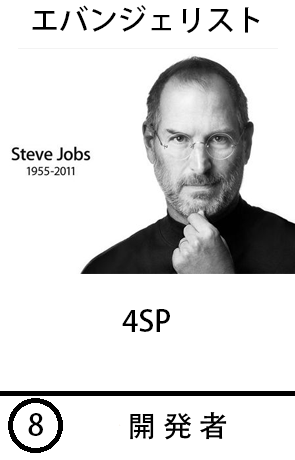
<style>
.page{position:relative;width:295px;height:460px;background:#ffffff}
.page>*{position:absolute;margin:0}
.t1{font:29.3px "AdobeHeitiStd-Regular";color:#000000}
</style>
<div class="page">
<p class="t1" style="left:32px;top:5px;width:228px;height:29px">エバンジェリスト</p>
<p class="t1" style="left:122px;top:309px;width:48px;height:23px">4SP</p>
<p class="t1" style="left:28px;top:413px;width:15px;height:23px">8</p>
<p class="t1" style="left:130px;top:412px;width:97px;height:28px">開 発 者</p>
</div>
